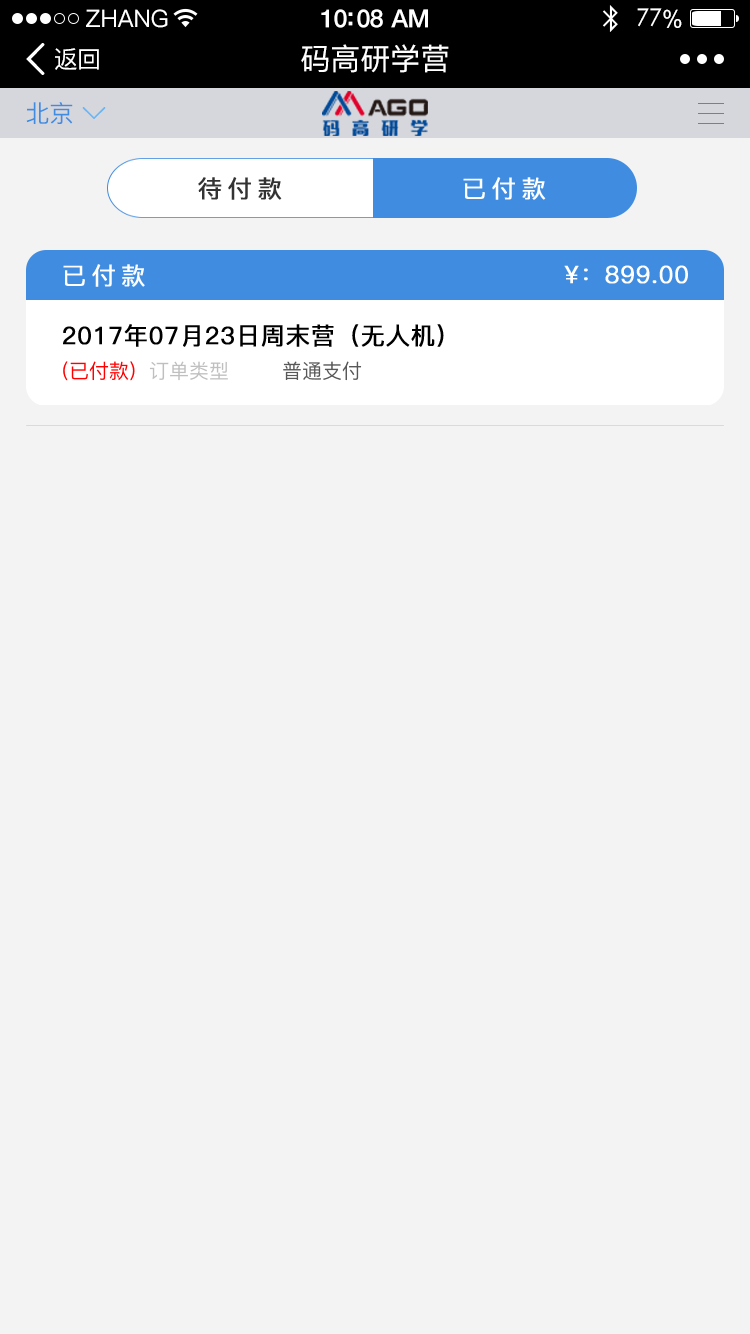
<style>
.page{position:relative;width:750px;height:1334px;background:#f3f3f3}
.page>*{position:absolute;margin:0}
.t1{font:24px "PingFang-SC-Medium";color:#ffffff}
.t2{font:25px "HelveticaNeue-Medium";letter-spacing:-0.02em;color:#ffffff}
.t3{font:24px "STXihei";letter-spacing:-0.02em;color:#ffffff}
.t4{font:24px "ArialUnicodeMS";letter-spacing:-0.02em;color:#ffffff}
.t5{font:24px "PingFang-SC-Medium";letter-spacing:-0.02em;color:#ffffff}
.t6{font:30px "PingFang-SC-Medium";color:#ffffff}
.t7{font:24px "PingFang-SC-Medium";color:#408ce1}
.t8{font:24px "PingFang-SC-Medium";letter-spacing:0.2em;color:#333333;font-weight:bold}
.t9{font:24px "PingFang-SC-Medium";letter-spacing:0.2em;color:#ffffff;font-weight:bold}
.t10{font:24px "PingFang-SC-Medium";color:#ffffff;font-weight:bold}
.t11{font:24px "PingFang-SC-Medium";color:#000000;font-weight:bold}
.t12{font:20px "PingFang-SC-Medium";color:#ff0000}
.t13{font:20px "PingFang-SC-Medium";color:#bfbfbf}
.t14{font:20px "PingFang-SC-Medium";color:#585858}
</style>
<div class="page">
<p class="t1" style="left:86px;top:9px;width:82px;height:19px">ZHANG</p>
<p class="t2" style="left:321px;top:9px;width:107px;height:19px">10:08 AM</p>
<p class="t3" style="left:637px;top:8px;width:45px;height:20px">77<span class="t4">%</span></p>
<p class="t5" style="left:55px;top:48px;width:44px;height:22px">返回</p>
<p class="t6" style="left:301px;top:44px;width:148px;height:29px">码高研学营</p>
<p class="t7" style="left:26px;top:102px;width:47px;height:22px">北京</p>
<p class="t8" style="left:198px;top:177px;width:84px;height:23px">待付款</p>
<p class="t9" style="left:463px;top:177px;width:83px;height:23px">已付款</p>
<p class="t9" style="left:63px;top:264px;width:82px;height:23px">已付款</p>
<p class="t10" style="left:564px;top:265px;width:124px;height:19px">¥：899.00</p>
<p class="t11" style="left:63px;top:324px;width:381px;height:23px">2017年07月23日周末营（无人机）</p>
<p class="t12" style="left:63px;top:361px;width:299px;height:20px">(已付款)  <span class="t13">订单类型        </span><span class="t14">普通支付</span></p>
</div>
